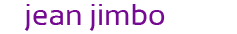
<style>
.page{position:relative;width:237px;height:34px;background:#ffffff}
.page>*{position:absolute;margin:0}
.t1{font:30px "Sansation";color:#760991}
</style>
<div class="page">
<p class="t1" style="left:24px;top:4px;width:141px;height:27px">jean jimbo</p>
</div>
